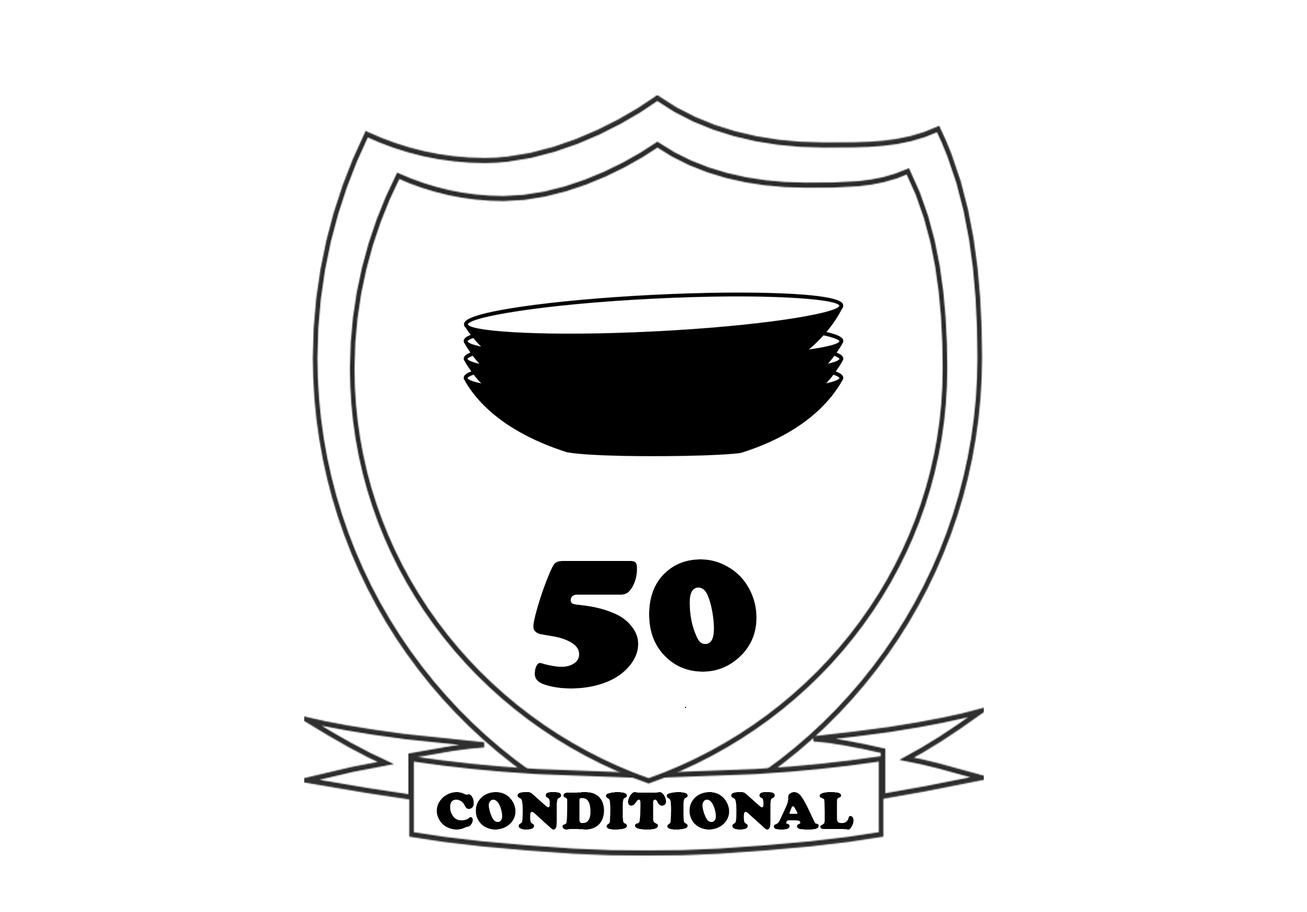
<style>
.page{position:relative;width:1307px;height:912px;background:#ffffff}
.page>*{position:absolute;margin:0}
.t1{font:195.3px "CooperBlack";color:#000000}
.t2{font:54.3px "CooperBlack";color:#000000}
</style>
<div class="page">
<p class="t1" style="left:533px;top:559px;width:224px;height:129px">50</p>
<p class="t2" style="left:437px;top:792px;width:417px;height:38px">CONDITIONAL</p>
</div>
